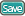
<style>
.page{position:relative;width:25px;height:16px}
.page>*{position:absolute;margin:0}
.t1{font:9px "UDShinGoPro-Light";letter-spacing:-0.04em;color:#ffffff}
</style>
<div class="page">
<p class="t1" style="left:3px;top:5px;width:20px;height:7px">Save</p>
</div>
